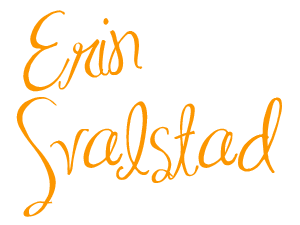
<style>
.page{position:relative;width:300px;height:225px;background:#ffffff}
.page>*{position:absolute;margin:0}
.t1{font:72px/95px "MASexy";color:#fc9600}
</style>
<div class="page">
<p class="t1" style="left:16px;top:10px;width:266px;height:207px">Erin<br>Svalstad</p>
</div>
